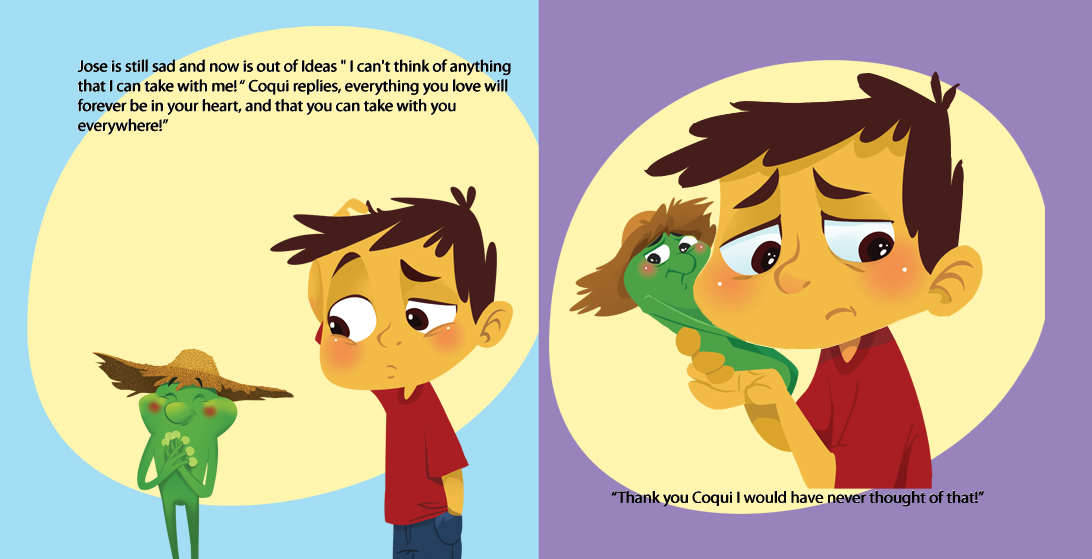
<style>
.page{position:relative;width:1092px;height:559px;background:#fff5ae}
.page>*{position:absolute;margin:0}
.t1{font:16.5px "MyriadPro-Regular"}
.t2{font:16.5px "MyriadPro-Regular";color:#040404}
</style>
<div class="page">
<p class="t1" style="left:76px;top:59px;width:433px;height:76px">Jose is still sad and now is out of Ideas " I can't think of anything <br>that I can take with me! “ Coqui replies, everything you love will <br>forever be in your heart, and that you can take with you <br>everywhere!”</p>
<p class="t2" style="left:77px;top:59px;width:433px;height:76px">Jose is still sad and now is out of Ideas " I can't think of anything <br>that I can take with me! “ Coqui replies, everything you love will <br>forever be in your heart, and that you can take with you <br>everywhere!”</p>
<p class="t2" style="left:78px;top:59px;width:433px;height:76px">Jose is still sad and now is out of Ideas " I can't think of anything <br>that I can take with me! “ Coqui replies, everything you love will <br>forever be in your heart, and that you can take with you <br>everywhere!”</p>
<p class="t2" style="left:611px;top:490px;width:373px;height:16px">“Thank you Coqui I would have never thought of that!”</p>
<p class="t2" style="left:611px;top:490px;width:373px;height:17px">“Thank you Coqui I would have never thought of that!”</p>
<p class="t2" style="left:612px;top:490px;width:372px;height:17px">“Thank you Coqui I would have never thought of that!”</p>
</div>
